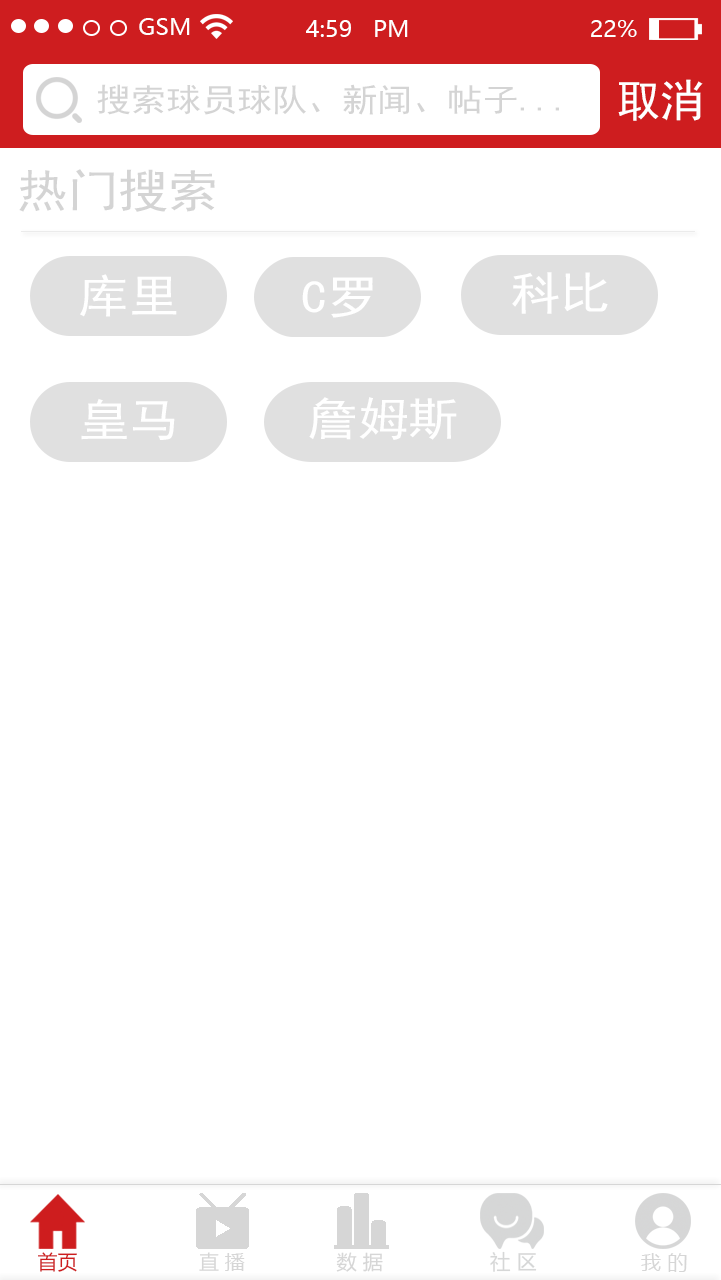
<style>
.page{position:relative;width:721px;height:1280px;background:#ffffff}
.page>*{position:absolute;margin:0}
.t1{font:21.8px "MicrosoftYaHei";color:#ffffff;scale:1.06 1}
.t2{font:21.8px "MicrosoftYaHei";color:#fefefe;scale:1.06 1}
.t3{font:31.9px "SimHei";color:#d4d4d4;scale:1.1 1}
.t4{font:44.3px "SimHei";color:#ffffff}
.t5{font:45.8px "SimHei";color:#d4d4d4;scale:1.1 1}
.t6{font:45.8px "SimHei";color:#ffffff;scale:1.1 1}
.t7{font:19.9px "MicrosoftYaHei";color:#ce1d1e}
.t8{font:19.9px "MicrosoftYaHei";color:#d6d6d6}
.t9{font:20.7px "MicrosoftYaHei";color:#d6d7d7}
.t10{font:20.7px "MicrosoftYaHei";color:#d6d6d6}
</style>
<div class="page">
<p class="t1" style="left:139px;top:18px;width:51px;height:17px">GSM</p>
<p class="t1" style="left:306px;top:20px;width:102px;height:17px">4:59   PM</p>
<p class="t2" style="left:591px;top:20px;width:46px;height:17px">22%</p>
<p class="t3" style="left:97px;top:84px;width:462px;height:31px">搜索球员球队、新闻、帖子...</p>
<p class="t4" style="left:618px;top:79px;width:85px;height:42px">取消</p>
<p class="t5" style="left:19px;top:169px;width:196px;height:43px">热门搜索</p>
<p class="t6" style="left:80px;top:274px;width:97px;height:43px">库里</p>
<p class="t6" style="left:302px;top:277px;width:71px;height:41px">C罗</p>
<p class="t6" style="left:512px;top:272px;width:96px;height:42px">科比</p>
<p class="t6" style="left:81px;top:398px;width:94px;height:42px">皇马</p>
<p class="t6" style="left:309px;top:397px;width:148px;height:43px">詹姆斯</p>
<p class="t7" style="left:38px;top:1252px;width:39px;height:20px">首页</p>
<p class="t8" style="left:199px;top:1252px;width:46px;height:19px">直 播</p>
<p class="t8" style="left:336px;top:1252px;width:47px;height:20px">数 据</p>
<p class="t9" style="left:490px;top:1251px;width:47px;height:21px">社 区</p>
<p class="t10" style="left:641px;top:1253px;width:46px;height:19px">我 的</p>
</div>
